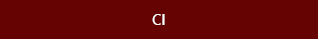
<style>
.page{position:relative;width:318px;height:39px;background:#650202}
.page>*{position:absolute;margin:0}
.t1{font:15px "SegoeUI-Semibold";color:#ffffff}
</style>
<div class="page">
<p class="t1" style="left:152px;top:14px;width:13px;height:11px">CI</p>
</div>
